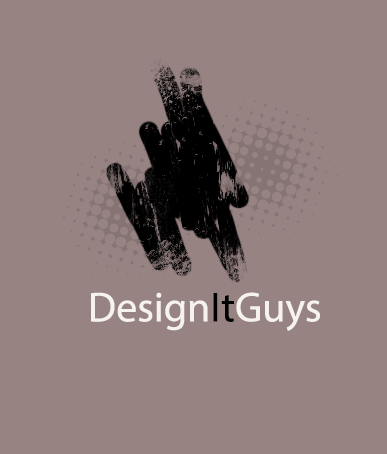
<style>
.page{position:relative;width:387px;height:454px;background:#988383}
.page>*{position:absolute;margin:0}
.t1{font:42.1px "MyriadPro-Regular";color:#f6f2ee}
.t2{font:42.1px "MyriadPro-Regular";color:#000000}
</style>
<div class="page">
<p class="t1" style="left:91px;top:292px;width:229px;height:39px">Design<span class="t2">It</span>Guys</p>
</div>
